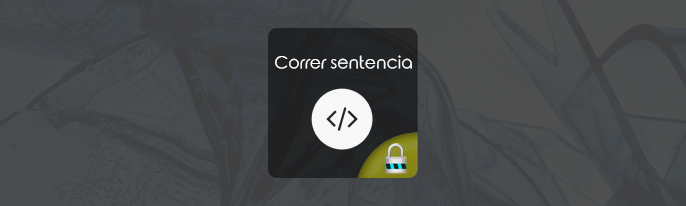
<style>
.page{position:relative;width:686px;height:206px}
.page>*{position:absolute;margin:0}
.t1{font:17.3px "RoundedElegance-Regular";color:#ffffff}
</style>
<div class="page">
<p class="t1" style="left:275px;top:55px;width:137px;height:14px">Correr sentencia</p>
</div>
